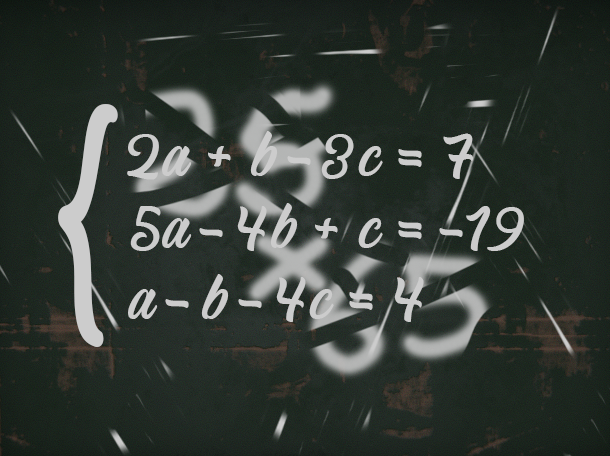
<style>
.page{position:relative;width:610px;height:456px}
.page>*{position:absolute;margin:0}
.t1{font:222.1px "Blanchope-Regular";color:#cccccc;scale:0.71 1}
.t2{font:59.6px "Blanchope-Regular";color:#cccccc}
</style>
<div class="page">
<p class="t1" style="left:58px;top:104px;width:60px;height:243px;rotate:-9deg">{</p>
<p class="t2" style="left:127px;top:131px;width:397px;height:191px">2a + b - 3c = 7<br>5a - 4b + c = -19<br>a - b - 4c = 4</p>
</div>
